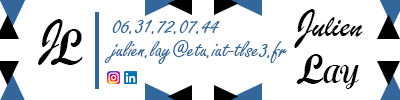
<style>
.page{position:relative;width:400px;height:100px;background:#ffffff}
.page>*{position:absolute;margin:0}
.t1{font:33.3px "BrushScriptMT";color:#000000}
.t2{font:41.7px "BrushScriptMT";color:#000000}
.t3{font:50px "BrushScriptMT";color:#000000}
.t4{font:50px "ScriptMTBold";color:#010101}
.t5{font:25px "FreestyleScript-Regular";color:#33669a}
.t6{font:25px "ScriptMTBold";color:#010101}
.t7{font:41.7px "ScriptMTBold";color:#010101}
</style>
<div class="page">
<p class="t1" style="left:294px;top:9px;width:69px;height:39px"><span class="t2">J</span>ulien</p>
<p class="t3" style="left:38px;top:19px;width:25px;height:46px">J</p>
<p class="t4" style="left:50px;top:29px;width:33px;height:36px">L</p>
<p class="t5" style="left:112px;top:20px;width:108px;height:14px">06.31.72.07.44</p>
<p class="t5" style="left:104px;top:40px;width:183px;height:24px">julien.lay@etu.iut-tlse3.fr</p>
<p class="t6" style="left:296px;top:54px;width:63px;height:35px"><span class="t1"> </span><span class="t7">L</span>AY</p>
</div>
